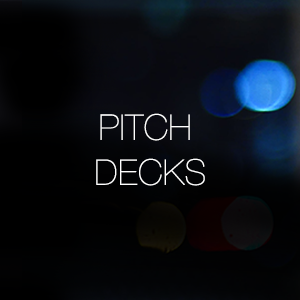
<style>
.page{position:relative;width:300px;height:300px}
.page>*{position:absolute;margin:0}
.t1{font:35px/45px "HelveticaNeue-UltraLight";color:#ffffff;font-weight:bold}
</style>
<div class="page">
<p class="t1" style="left:96px;top:113px;width:109px;height:73px;text-align:center">PITCH <br>DECKS</p>
</div>
